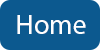
<style>
.page{position:relative;width:100px;height:50px;background:#0c598f}
.page>*{position:absolute;margin:0}
.t1{font:28px "MyriadPro-Regular";color:#ffffff}
</style>
<div class="page">
<p class="t1" style="left:17px;top:15px;width:69px;height:19px">Home</p>
</div>
